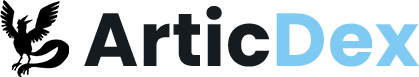
<style>
.page{position:relative;width:419px;height:77px;background:#ffffff}
.page>*{position:absolute;margin:0}
.t1{font:75px "Poppins-Bold";letter-spacing:0.01em}
</style>
<div class="page">
<p class="t1" style="left:84px;top:6px;width:335px;height:61px">ArticDex</p>
</div>
